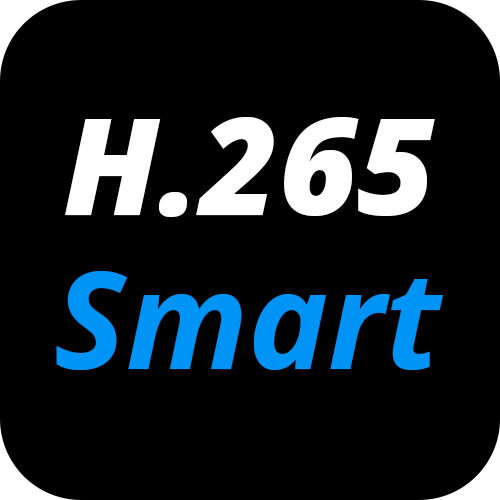
<style>
.page{position:relative;width:500px;height:500px;background:#000000}
.page>*{position:absolute;margin:0}
.t1{font:135.1px "OpenSans-ExtraBoldItalic";color:#ffffff}
.t2{font:135px "OpenSans-BoldItalic";color:#0094f7}
</style>
<div class="page">
<p class="t1" style="left:65px;top:117px;width:370px;height:100px">H.265</p>
<p class="t2" style="left:56px;top:271px;width:387px;height:99px">Smart</p>
</div>
